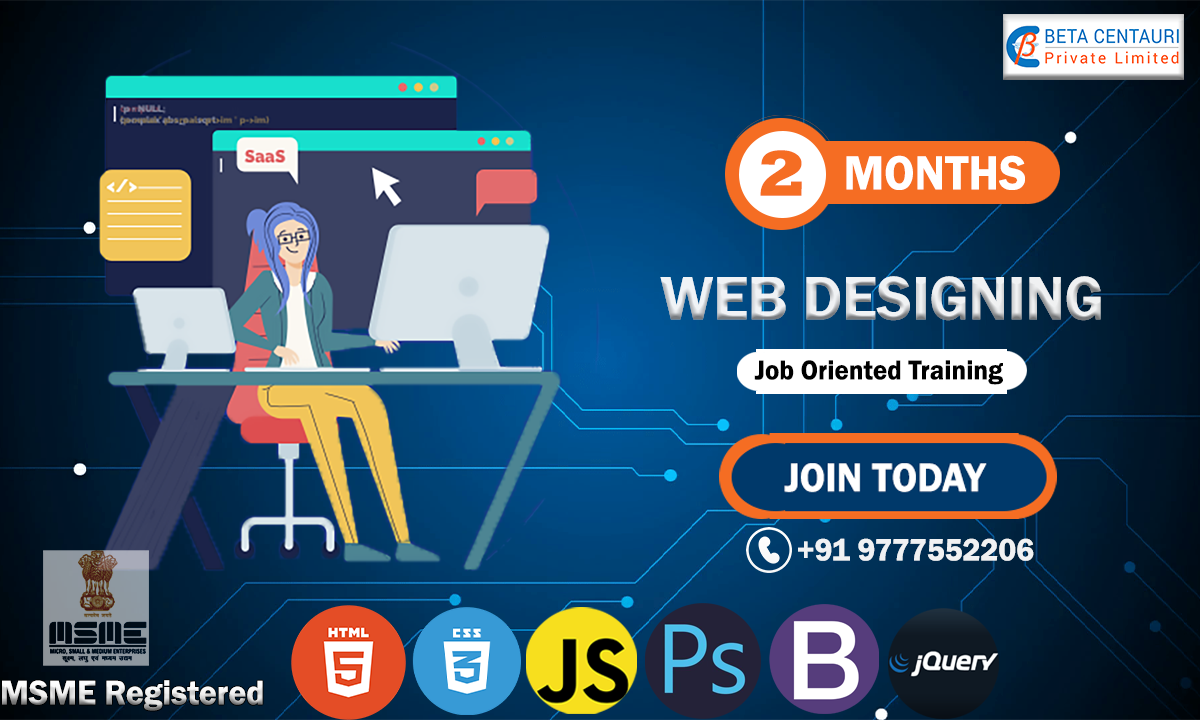
<style>
.page{position:relative;width:1200px;height:720px}
.page>*{position:absolute;margin:0}
.t1{font:65.4px "Rockwell-ExtraBold";color:#f56d23;scale:1.15 1}
.t2{font:49.6px "FranklinGothic-Demi";color:#ffffff;scale:0.96 1}
.t3{font:63.5px "FranklinGothic-Demi";scale:0.96 1}
.t4{font:28.1px "FranklinGothic-Demi";color:#000000;scale:0.96 1}
.t5{font:31.9px "FranklinGothic-Demi";color:#ffffff;scale:0.96 1}
.t6{font:35px "FranklinGothic-Demi";scale:0.96 1}
</style>
<div class="page">
<p class="t1" style="left:760px;top:150px;width:42px;height:46px">2</p>
<p class="t2" style="left:846px;top:155px;width:179px;height:35px">MONTHS</p>
<p class="t3" style="left:660px;top:276px;width:441px;height:45px">WEB DESIGNING</p>
<p class="t4" style="left:754px;top:360px;width:249px;height:25px">Job Oriented Training</p>
<p class="t5" style="left:798px;top:538px;width:236px;height:23px;opacity:0.91">+91 9777552206</p>
<p class="t6" style="left:2px;top:680px;width:261px;height:31px">MSME Registered</p>
</div>
